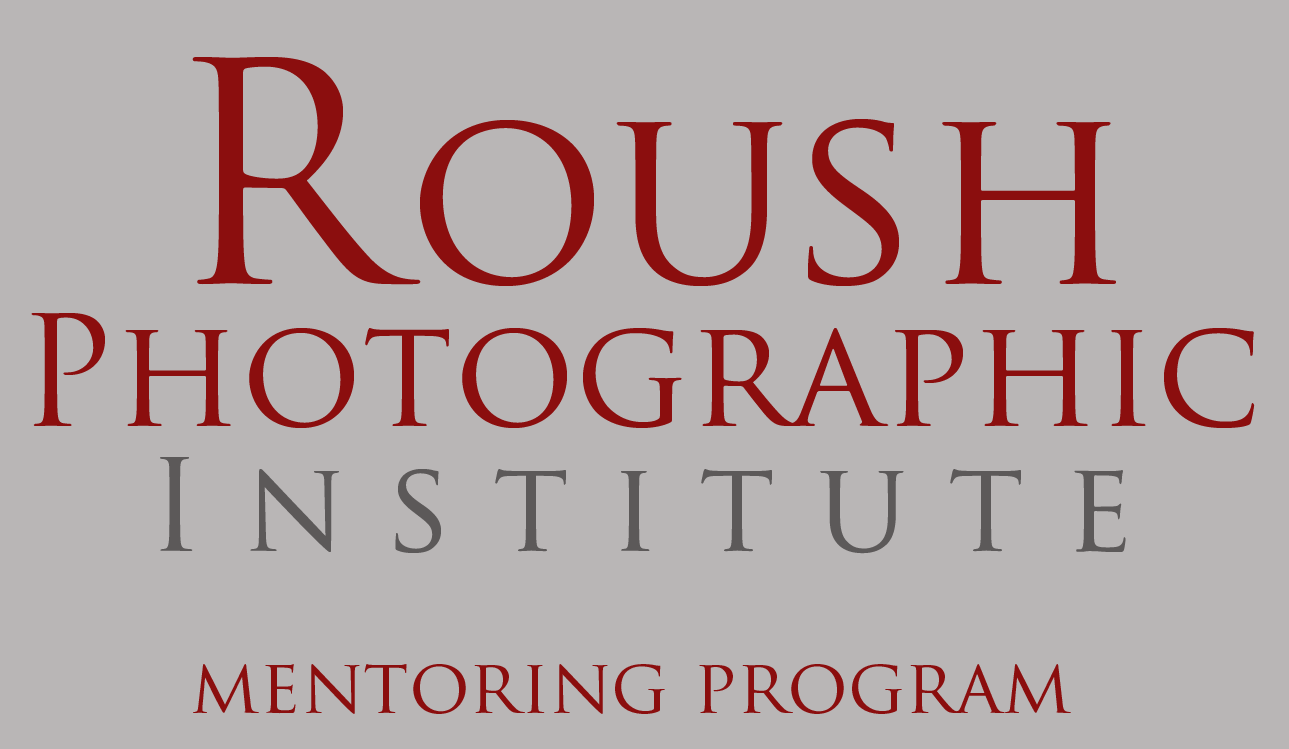
<style>
.page{position:relative;width:1289px;height:749px;background:#b9b6b6}
.page>*{position:absolute;margin:0}
.t1{font:300px "TrajanPro-Regular";color:#8b0e0e}
.t2{font:250px "TrajanPro-Regular";color:#8b0e0e}
.t3{font:150px "TrajanPro-Regular";color:#8b0e0e}
.t4{font:75px "TrajanPro-Regular";color:#8b0e0e}
</style>
<div class="page">
<p class="t1" style="left:192px;top:57px;width:229px;height:228px">R</p>
<p class="t2" style="left:420px;top:119px;width:696px;height:167px">oush</p>
<p class="t3" style="left:31px;top:313px;width:1224px;height:115px">Photographic</p>
<p class="t4" style="left:193px;top:664px;width:878px;height:50px">mentoring program</p>
</div>
